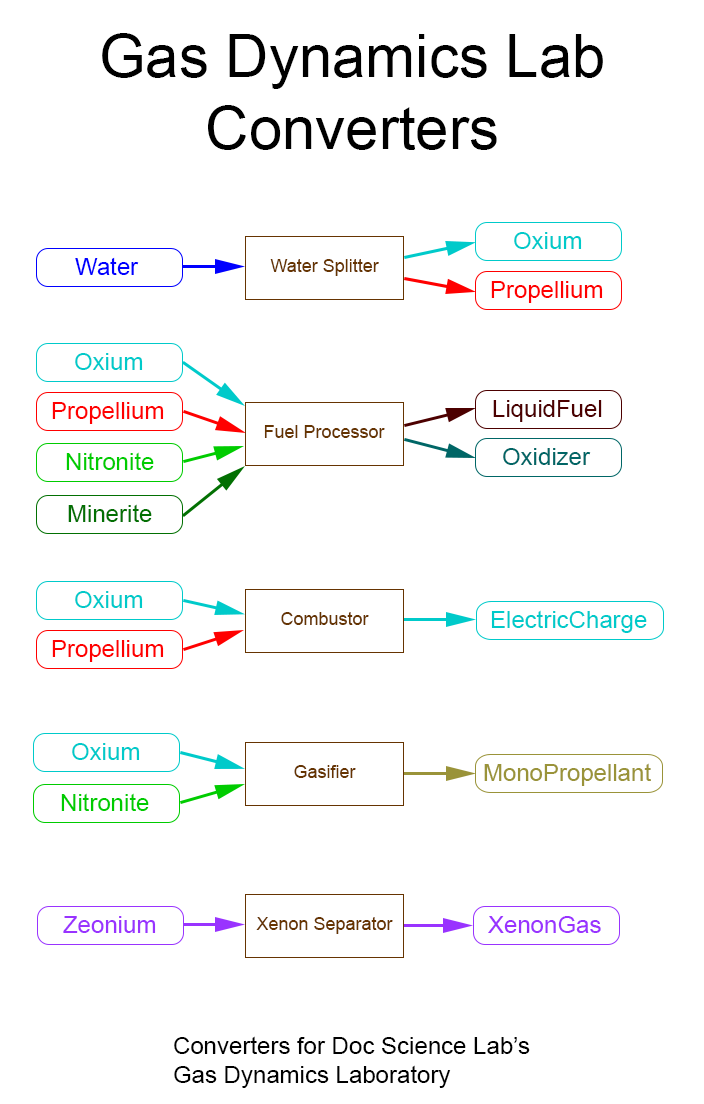
<style>
.page{position:relative;width:704px;height:1104px;background:#ffffff}
.page>*{position:absolute;margin:0}
.t1{font:60px "ArialMT";color:#000000}
.t2{font:24px "ArialMT";color:#00caca}
.t3{font:24px "ArialMT";color:#0000ff}
.t4{font:18px "ArialMT";color:#663401}
.t5{font:24px "ArialMT";color:#ff0000}
.t6{font:24px "ArialMT";color:#4c0000}
.t7{font:24px "ArialMT";color:#006666}
.t8{font:24px "ArialMT";color:#00cc00}
.t9{font:24px "ArialMT";color:#027002}
.t10{font:24px "ArialMT";color:#9a9339}
.t11{font:24px "ArialMT";color:#9933ff}
.t12{font:24px "ArialMT";color:#000000}
</style>
<div class="page">
<p class="t1" style="left:102px;top:33px;width:501px;height:117px;text-align:center">Gas Dynamics Lab<br>Converters</p>
<p class="t2" style="left:514px;top:232px;width:68px;height:17px">Oxium</p>
<p class="t3" style="left:75px;top:257px;width:64px;height:18px">Water</p>
<p class="t4" style="left:270px;top:259px;width:109px;height:17px">Water Splitter</p>
<p class="t5" style="left:491px;top:281px;width:112px;height:22px">Propellium</p>
<p class="t2" style="left:75px;top:353px;width:68px;height:17px">Oxium</p>
<p class="t6" style="left:493px;top:400px;width:109px;height:22px">LiquidFuel</p>
<p class="t5" style="left:52px;top:402px;width:112px;height:22px">Propellium</p>
<p class="t4" style="left:264px;top:425px;width:121px;height:13px">Fuel Processor</p>
<p class="t7" style="left:503px;top:448px;width:88px;height:17px">Oxidizer</p>
<p class="t8" style="left:66px;top:452px;width:88px;height:18px">Nitronite</p>
<p class="t9" style="left:68px;top:504px;width:84px;height:18px">Minerite</p>
<p class="t2" style="left:75px;top:591px;width:68px;height:17px">Oxium</p>
<p class="t4" style="left:281px;top:612px;width:88px;height:13px">Combustor</p>
<p class="t2" style="left:491px;top:610px;width:156px;height:23px">ElectricCharge</p>
<p class="t5" style="left:52px;top:640px;width:112px;height:22px">Propellium</p>
<p class="t2" style="left:72px;top:743px;width:68px;height:17px">Oxium</p>
<p class="t4" style="left:294px;top:765px;width:62px;height:13px">Gasifier</p>
<p class="t10" style="left:484px;top:763px;width:167px;height:23px">MonoPropellant</p>
<p class="t8" style="left:61px;top:793px;width:88px;height:18px">Nitronite</p>
<p class="t11" style="left:63px;top:916px;width:93px;height:17px">Zeonium</p>
<p class="t4" style="left:256px;top:917px;width:137px;height:17px">Xenon Separator</p>
<p class="t11" style="left:488px;top:916px;width:113px;height:17px">XenonGas</p>
<p class="t12" style="left:174px;top:1036px;width:356px;height:52px">Converters for Doc Science Lab’s<br>Gas Dynamics Laboratory</p>
</div>
